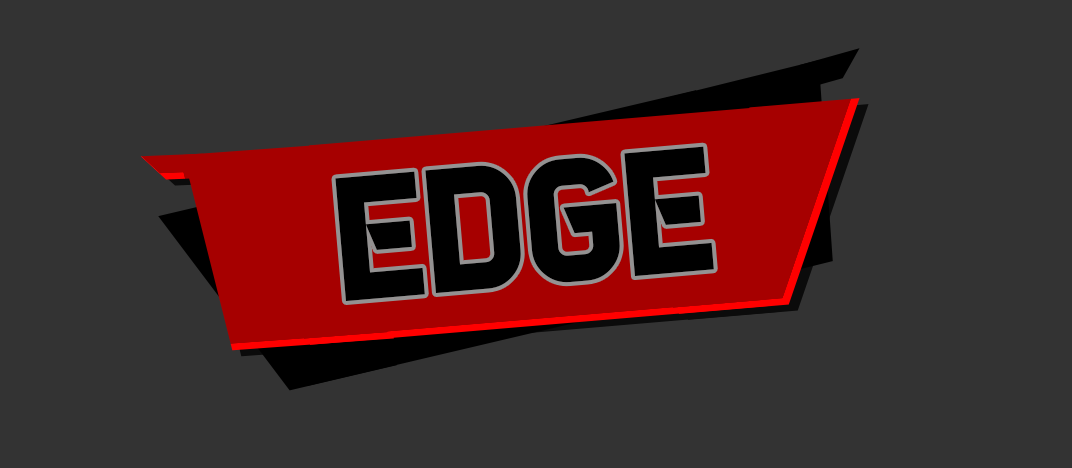
<style>
.page{position:relative;width:1072px;height:468px;background:#333333}
.page>*{position:absolute;margin:0}
.t1{font:180px "PiratesofCydonia";color:#000000}
</style>
<div class="page">
<p class="t1" style="left:335px;top:146px;width:379px;height:155px;rotate:-5deg">EDGE</p>
</div>
